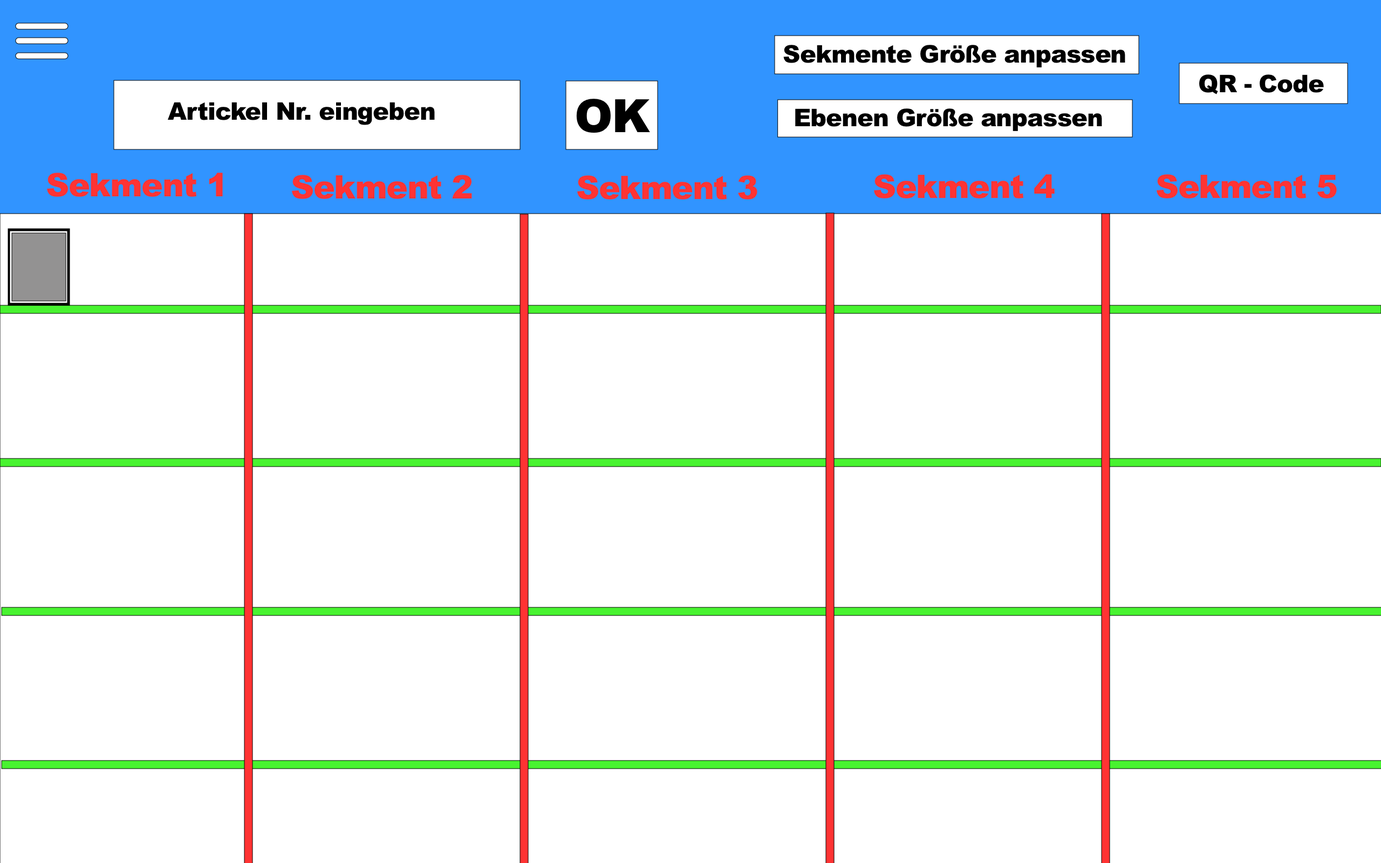
<style>
.page{position:relative;width:1381px;height:863px;background:#ffffff}
.page>*{position:absolute;margin:0}
.t1{font:24.3px "Arial-Black";letter-spacing:-0.024em;color:#000000}
.t2{font:45.9px "Arial-Black";letter-spacing:-0.024em;color:#000000}
.t3{font:32.4px "Arial-Black";letter-spacing:-0.024em;color:#ff3333}
</style>
<div class="page">
<p class="t1" style="left:783px;top:45px;width:343px;height:22px">Sekmente Größe anpassen</p>
<p class="t1" style="left:1199px;top:74px;width:125px;height:20px">QR - Code</p>
<p class="t1" style="left:168px;top:102px;width:267px;height:23px">Artickel Nr. eingeben</p>
<p class="t2" style="left:576px;top:99px;width:74px;height:34px">OK</p>
<p class="t1" style="left:795px;top:108px;width:307px;height:23px">Ebenen Größe anpassen</p>
<p class="t3" style="left:47px;top:173px;width:176px;height:24px">Sekment 1</p>
<p class="t3" style="left:292px;top:175px;width:180px;height:24px">Sekment 2</p>
<p class="t3" style="left:577px;top:175px;width:181px;height:25px">Sekment 3</p>
<p class="t3" style="left:874px;top:174px;width:181px;height:25px">Sekment 4</p>
<p class="t3" style="left:1157px;top:174px;width:180px;height:25px">Sekment 5</p>
</div>
